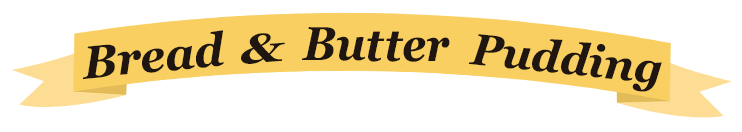
<style>
.page{position:relative;width:742px;height:132px;background:#ffffff}
.page>*{position:absolute;margin:0}
.t1{font:46.1px "Georgia-BoldItalic";color:#1f1511}
.t2{font:47.4px "Georgia-BoldItalic";color:#1f1511;scale:0.91 1}
.t3{font:40.8px "Georgia-BoldItalic";color:#1f1511;scale:1.35 1}
.t4{font:44.1px "Georgia-BoldItalic";color:#1f1511}
</style>
<div class="page">
<p class="t1" style="left:82px;top:30px;width:142px;height:49px;rotate:-6deg">Bread</p>
<p class="t2" style="left:301px;top:27px;width:149px;height:35px">Butter</p>
<p class="t3" style="left:241px;top:33px;width:44px;height:31px;rotate:-4deg">&amp;</p>
<p class="t4" style="left:468px;top:34px;width:194px;height:58px;rotate:6deg">Pudding</p>
</div>
